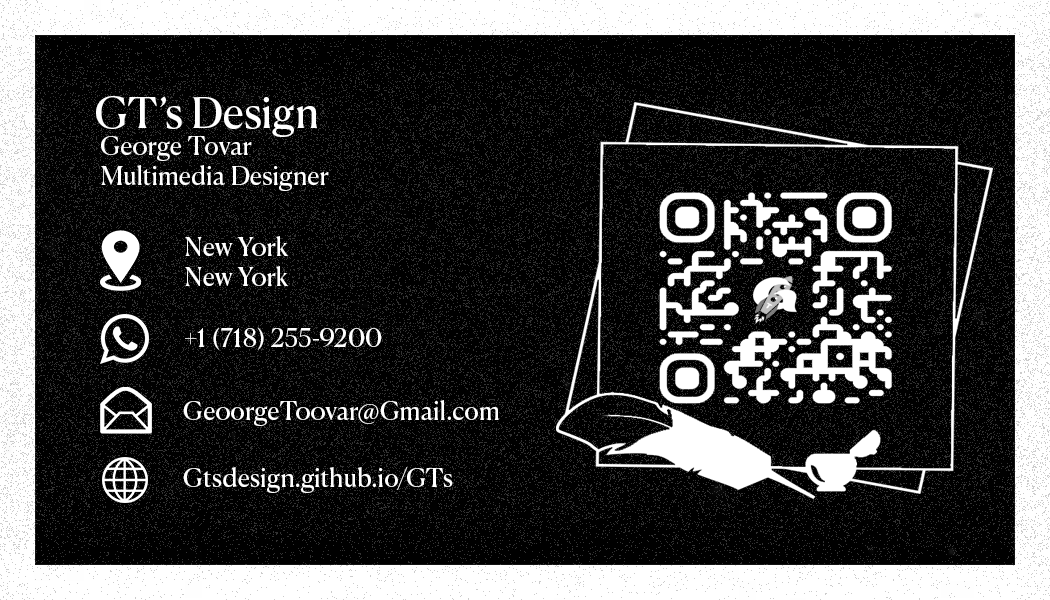
<style>
.page{position:relative;width:1050px;height:600px;background:#000000}
.page>*{position:absolute;margin:0}
.t1{font:41.7px "CanelaDeck-Regular";color:#ffffff}
.t2{font:25px "CanelaDeck-Regular";color:#ffffff}
</style>
<div class="page">
<p class="t1" style="left:96px;top:96px;width:221px;height:41px">GT’s Design</p>
<p class="t2" style="left:101px;top:136px;width:228px;height:55px">George Tovar<br>Multimedia Designer</p>
<p class="t2" style="left:185px;top:236px;width:104px;height:50px">New York<br>New York</p>
<p class="t2" style="left:185px;top:327px;width:197px;height:23px">+1 (718) 255-9200</p>
<p class="t2" style="left:183px;top:400px;width:316px;height:26px">GeoorgeToovar@Gmail.com</p>
<p class="t2" style="left:183px;top:467px;width:270px;height:26px">Gtsdesign.github.io/GTs</p>
</div>
